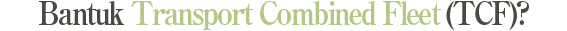
<style>
.page{position:relative;width:567px;height:31px;background:#ffffff}
.page>*{position:absolute;margin:0}
.t1{font:32px "RyuminPro-ExBold";letter-spacing:-0.08em;color:#b5c784;scale:0.9 1}
.t2{font:32px "RyuminPro-ExBold";letter-spacing:-0.08em;color:#4c4842;scale:0.9 1}
</style>
<div class="page">
<p class="t1" style="left:39px;top:1px;width:490px;height:29px"><span class="t2">Bantuk </span>Transport Combined Fleet<span class="t2"> (TCF)?</span></p>
</div>
